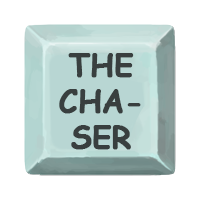
<style>
.page{position:relative;width:200px;height:200px;background:#ffffff}
.page>*{position:absolute;margin:0}
.t1{font:30px "ComicSansMS-Bold";color:#393f3f;font-weight:bold}
</style>
<div class="page">
<p class="t1" style="left:59px;top:53px;width:82px;height:97px;text-align:center">THE<br>CHA-<br>SER</p>
</div>
